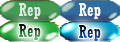
<style>
.page{position:relative;width:120px;height:42px}
.page>*{position:absolute;margin:0}
.t1{font:18px "Rockwell-Condensed";letter-spacing:0.025em;color:#ddece1}
.t2{font:18px "Rockwell-Condensed";letter-spacing:0.025em;color:#ffffff}
.t3{font:18px "Rockwell-Condensed";letter-spacing:0.025em}
</style>
<div class="page">
<p class="t1" style="left:19px;top:3px;width:22px;height:16px">Rep</p>
<p class="t2" style="left:79px;top:3px;width:22px;height:16px">Rep</p>
<p class="t3" style="left:19px;top:24px;width:22px;height:16px">Rep</p>
<p class="t3" style="left:79px;top:25px;width:22px;height:16px">Rep</p>
</div>
